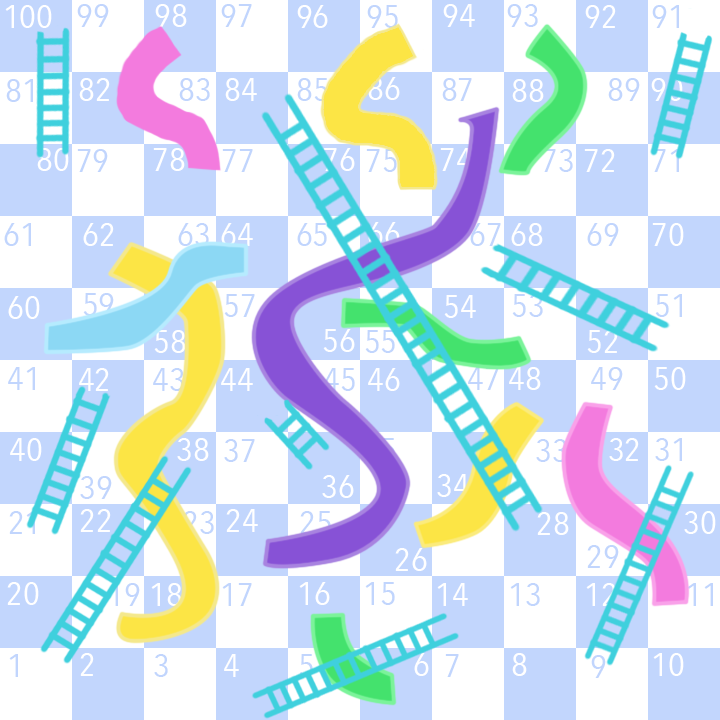
<style>
.page{position:relative;width:720px;height:720px;background:#ffffff}
.page>*{position:absolute;margin:0}
.t1{font:33.5px "AvenirNextCondensed-Regular";color:#ffffff;scale:1.08 1}
.t2{font:33.5px "AvenirNextCondensed-Regular";color:#c1d5fd;scale:1.08 1}
</style>
<div class="page">
<p class="t1" style="left:5px;top:5px;width:47px;height:23px">100</p>
<p class="t2" style="left:77px;top:4px;width:32px;height:23px">99</p>
<p class="t1" style="left:155px;top:4px;width:32px;height:23px">98</p>
<p class="t2" style="left:221px;top:4px;width:31px;height:23px">97</p>
<p class="t1" style="left:297px;top:5px;width:31px;height:23px">96</p>
<p class="t2" style="left:367px;top:5px;width:31px;height:23px">95</p>
<p class="t1" style="left:443px;top:4px;width:32px;height:23px">94</p>
<p class="t2" style="left:507px;top:4px;width:31px;height:23px">93</p>
<p class="t1" style="left:585px;top:5px;width:31px;height:23px">92</p>
<p class="t2" style="left:652px;top:5px;width:27px;height:23px">91</p>
<p class="t1" style="left:79px;top:78px;width:31px;height:23px">82</p>
<p class="t2" style="left:179px;top:78px;width:31px;height:23px">83</p>
<p class="t1" style="left:225px;top:78px;width:32px;height:23px">84</p>
<p class="t2" style="left:297px;top:78px;width:31px;height:23px">85</p>
<p class="t1" style="left:368px;top:77px;width:32px;height:23px">86</p>
<p class="t2" style="left:442px;top:78px;width:30px;height:23px">87</p>
<p class="t2" style="left:608px;top:78px;width:32px;height:23px">89</p>
<p class="t1" style="left:651px;top:78px;width:32px;height:23px">90</p>
<p class="t2" style="left:6px;top:79px;width:27px;height:23px">81</p>
<p class="t1" style="left:512px;top:79px;width:32px;height:23px">88</p>
<p class="t1" style="left:37px;top:148px;width:32px;height:23px">80</p>
<p class="t2" style="left:77px;top:149px;width:31px;height:23px">79</p>
<p class="t1" style="left:153px;top:148px;width:32px;height:23px">78</p>
<p class="t2" style="left:222px;top:149px;width:31px;height:23px">77</p>
<p class="t1" style="left:323px;top:148px;width:32px;height:23px">76</p>
<p class="t2" style="left:366px;top:149px;width:31px;height:23px">75</p>
<p class="t1" style="left:440px;top:148px;width:32px;height:23px">74</p>
<p class="t2" style="left:542px;top:149px;width:31px;height:23px">73</p>
<p class="t1" style="left:584px;top:149px;width:31px;height:23px">72</p>
<p class="t2" style="left:652px;top:149px;width:27px;height:23px">71</p>
<p class="t2" style="left:4px;top:223px;width:27px;height:23px">61</p>
<p class="t1" style="left:83px;top:223px;width:31px;height:23px">62</p>
<p class="t2" style="left:178px;top:223px;width:31px;height:23px">63</p>
<p class="t1" style="left:221px;top:223px;width:32px;height:23px">64</p>
<p class="t2" style="left:297px;top:223px;width:30px;height:23px">65</p>
<p class="t2" style="left:470px;top:223px;width:31px;height:23px">67</p>
<p class="t1" style="left:511px;top:223px;width:32px;height:23px">68</p>
<p class="t2" style="left:587px;top:223px;width:32px;height:23px">69</p>
<p class="t1" style="left:652px;top:223px;width:32px;height:23px">70</p>
<p class="t2" style="left:83px;top:293px;width:31px;height:23px">59</p>
<p class="t2" style="left:224px;top:294px;width:31px;height:23px">57</p>
<p class="t2" style="left:512px;top:294px;width:31px;height:23px">53</p>
<p class="t2" style="left:655px;top:294px;width:27px;height:23px">51</p>
<p class="t1" style="left:8px;top:296px;width:32px;height:23px">60</p>
<p class="t1" style="left:444px;top:295px;width:32px;height:23px">54</p>
<p class="t1" style="left:323px;top:329px;width:32px;height:23px">56</p>
<p class="t1" style="left:154px;top:330px;width:32px;height:23px">58</p>
<p class="t2" style="left:365px;top:330px;width:30px;height:23px">55</p>
<p class="t1" style="left:587px;top:330px;width:31px;height:23px">52</p>
<p class="t2" style="left:8px;top:367px;width:27px;height:23px">41</p>
<p class="t1" style="left:79px;top:368px;width:30px;height:23px">42</p>
<p class="t2" style="left:153px;top:368px;width:31px;height:23px">43</p>
<p class="t1" style="left:221px;top:368px;width:32px;height:23px">44</p>
<p class="t2" style="left:324px;top:368px;width:31px;height:23px">45</p>
<p class="t1" style="left:368px;top:368px;width:32px;height:23px">46</p>
<p class="t2" style="left:468px;top:367px;width:31px;height:23px">47</p>
<p class="t1" style="left:509px;top:367px;width:32px;height:23px">48</p>
<p class="t2" style="left:591px;top:367px;width:32px;height:23px">49</p>
<p class="t1" style="left:654px;top:367px;width:32px;height:23px">50</p>
<p class="t1" style="left:10px;top:438px;width:32px;height:23px">40</p>
<p class="t1" style="left:177px;top:438px;width:32px;height:23px">38</p>
<p class="t1" style="left:609px;top:438px;width:30px;height:23px">32</p>
<p class="t2" style="left:655px;top:438px;width:27px;height:23px">31</p>
<p class="t2" style="left:224px;top:439px;width:31px;height:23px">37</p>
<p class="t2" style="left:536px;top:439px;width:31px;height:23px">33</p>
<p class="t2" style="left:80px;top:476px;width:32px;height:23px">39</p>
<p class="t1" style="left:322px;top:475px;width:32px;height:23px">36</p>
<p class="t1" style="left:437px;top:474px;width:32px;height:23px">34</p>
<p class="t1" style="left:80px;top:509px;width:31px;height:23px">22</p>
<p class="t1" style="left:226px;top:509px;width:32px;height:23px">24</p>
<p class="t2" style="left:9px;top:511px;width:26px;height:23px">21</p>
<p class="t2" style="left:183px;top:511px;width:31px;height:23px">23</p>
<p class="t2" style="left:300px;top:511px;width:31px;height:23px">25</p>
<p class="t1" style="left:537px;top:512px;width:32px;height:23px">28</p>
<p class="t1" style="left:684px;top:511px;width:32px;height:23px">30</p>
<p class="t2" style="left:587px;top:545px;width:32px;height:23px">29</p>
<p class="t1" style="left:395px;top:548px;width:32px;height:23px">26</p>
<p class="t1" style="left:7px;top:582px;width:32px;height:23px">20</p>
<p class="t1" style="left:299px;top:582px;width:31px;height:23px">16</p>
<p class="t2" style="left:365px;top:582px;width:30px;height:23px">15</p>
<p class="t2" style="left:109px;top:583px;width:31px;height:23px">19</p>
<p class="t1" style="left:151px;top:583px;width:31px;height:23px">18</p>
<p class="t2" style="left:222px;top:583px;width:30px;height:23px">17</p>
<p class="t1" style="left:437px;top:583px;width:31px;height:23px">14</p>
<p class="t2" style="left:510px;top:583px;width:30px;height:23px">13</p>
<p class="t1" style="left:586px;top:583px;width:30px;height:23px">12</p>
<p class="t2" style="left:687px;top:583px;width:26px;height:23px">11</p>
<p class="t2" style="left:9px;top:654px;width:9px;height:23px">1</p>
<p class="t1" style="left:80px;top:653px;width:14px;height:23px">2</p>
<p class="t2" style="left:154px;top:654px;width:14px;height:23px">3</p>
<p class="t1" style="left:224px;top:654px;width:15px;height:23px">4</p>
<p class="t2" style="left:299px;top:654px;width:14px;height:23px">5</p>
<p class="t1" style="left:414px;top:653px;width:15px;height:23px">6</p>
<p class="t2" style="left:445px;top:654px;width:14px;height:23px">7</p>
<p class="t1" style="left:512px;top:653px;width:15px;height:23px">8</p>
<p class="t1" style="left:653px;top:653px;width:31px;height:23px">10</p>
<p class="t2" style="left:591px;top:655px;width:15px;height:23px">9</p>
</div>
